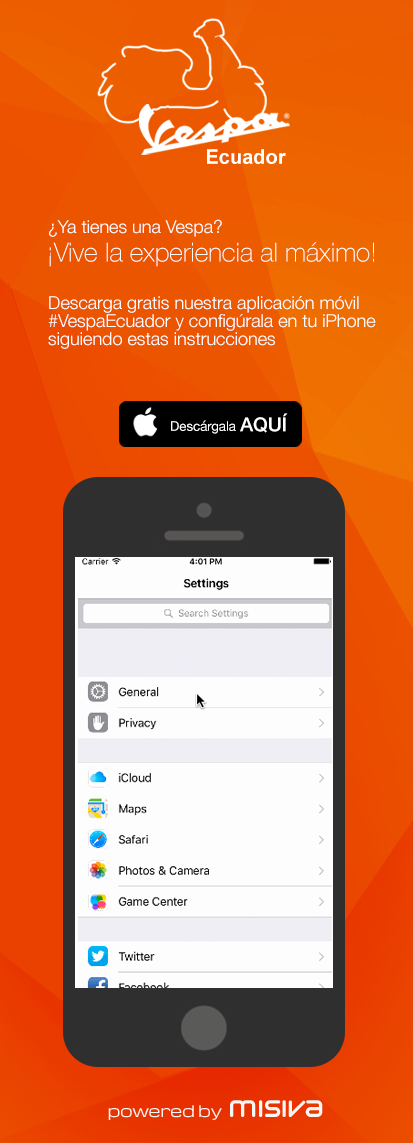
<style>
.page{position:relative;width:413px;height:1143px}
.page>*{position:absolute;margin:0}
.t1{font:20.1px "Arial-BoldMT";color:#ffffff}
.t2{font:18px "HelveticaNeue-Light";color:#ffffff}
.t3{font:26.2px "HelveticaNeue-Thin";color:#ffffff}
.t4{font:18px/18px "HelveticaNeue-Light";color:#ffffff}
.t5{font:19.1px "HelveticaNeue-Medium";color:#ffffff}
.t6{font:13.2px "HelveticaNeue";color:#ffffff}
</style>
<div class="page">
<p class="t1" style="left:207px;top:149px;width:79px;height:15px">Ecuador</p>
<p class="t2" style="left:49px;top:219px;width:173px;height:18px">¿Ya tienes una Vespa?</p>
<p class="t3" style="left:49px;top:242px;width:325px;height:25px">¡Vive la experiencia al máximo!</p>
<p class="t4" style="left:48px;top:296px;width:328px;height:53px">Descarga gratis nuestra aplicación móvil  #VespaEcuador y configúrala en tu iPhone<br>siguiendo estas instrucciones</p>
<p class="t5" style="left:240px;top:413px;width:48px;height:20px">AQUÍ</p>
<p class="t6" style="left:171px;top:420px;width:65px;height:14px">Descárgala</p>
</div>
